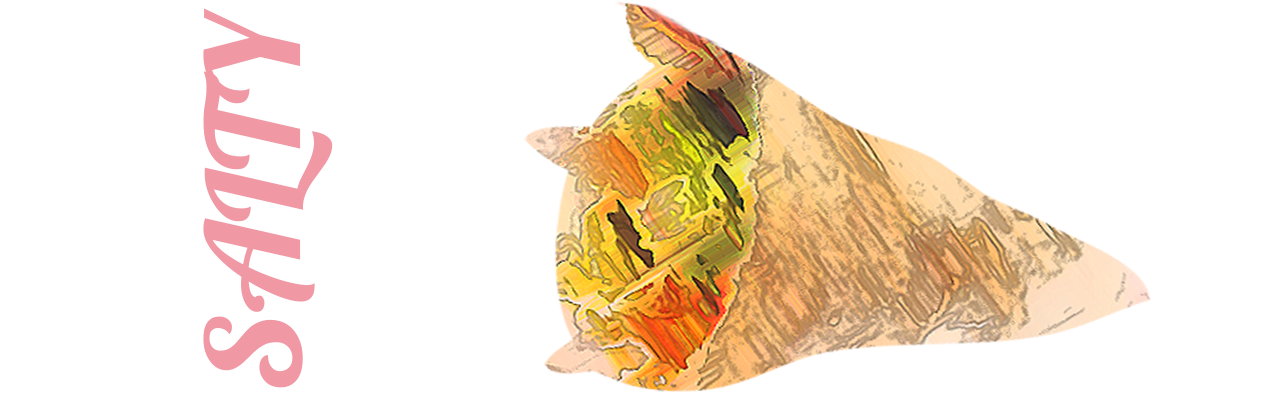
<style>
.page{position:relative;width:1280px;height:393px;background:#ffffff}
.page>*{position:absolute;margin:0}
.t1{font:128.7px "Lobster";color:#f098a4;scale:1.06 1}
</style>
<div class="page">
<p class="t1" style="left:203px;top:8px;width:130px;height:380px;rotate:-90deg">SALTY</p>
</div>
